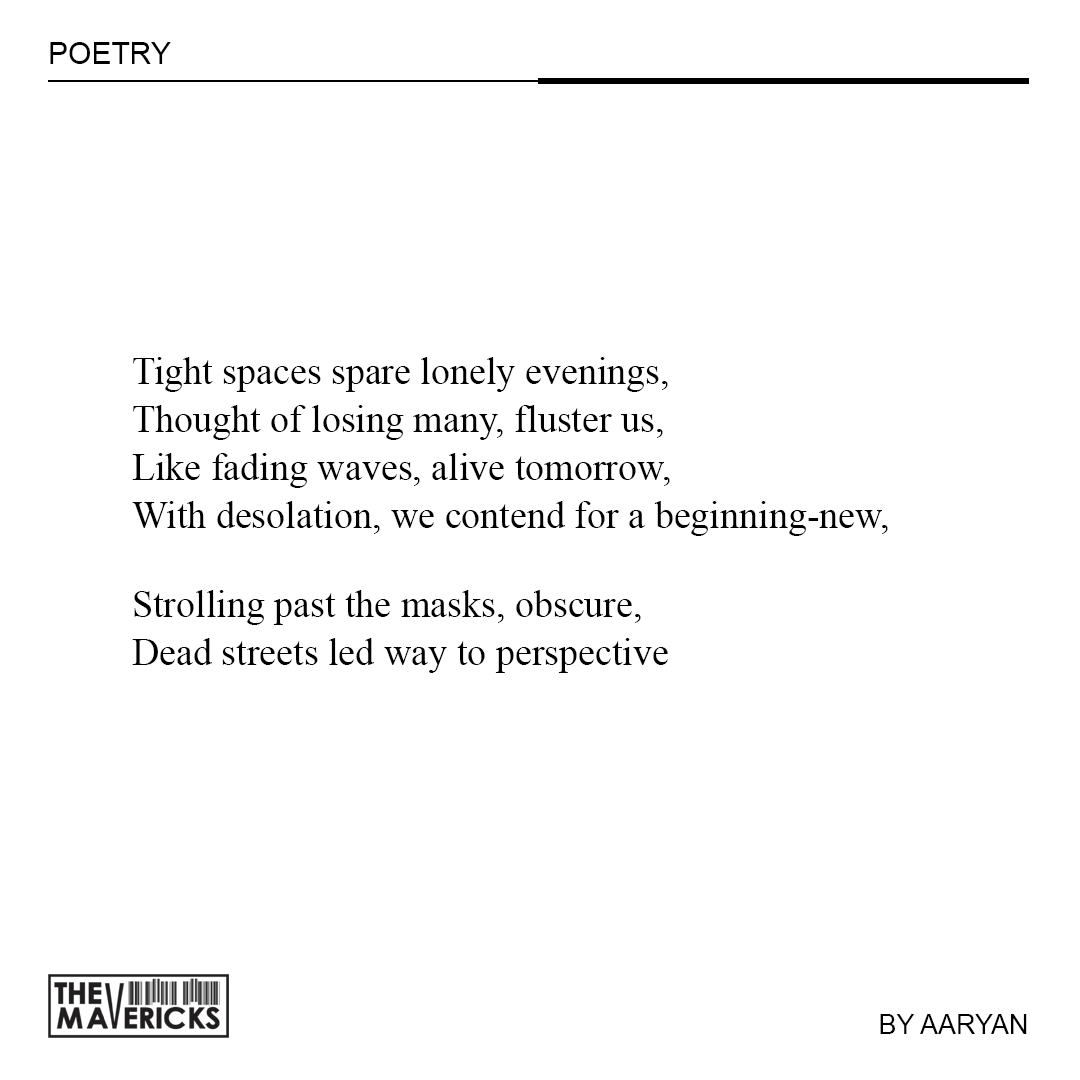
<style>
.page{position:relative;width:1080px;height:1080px;background:#ffffff}
.page>*{position:absolute;margin:0}
.t1{font:30px "ArialMT";color:#000000}
.t2{font:38px/48px "TimesNewRomanPSMT";color:#000000}
.t3{font:27px "ArialMT";color:#000000}
</style>
<div class="page">
<p class="t1" style="left:50px;top:42px;width:121px;height:22px">POETRY</p>
<p class="t2" style="left:132px;top:357px;width:756px;height:179px">Tight spaces spare lonely evenings,<br>Thought of losing many, fluster us,<br>Like fading waves, alive tomorrow,<br>With desolation, we contend for a beginning-new,</p>
<p class="t2" style="left:132px;top:590px;width:536px;height:83px">Strolling past the masks, obscure,<br>Dead streets led way to perspective</p>
<p class="t3" style="left:880px;top:1014px;width:147px;height:20px">BY AARYAN</p>
</div>
